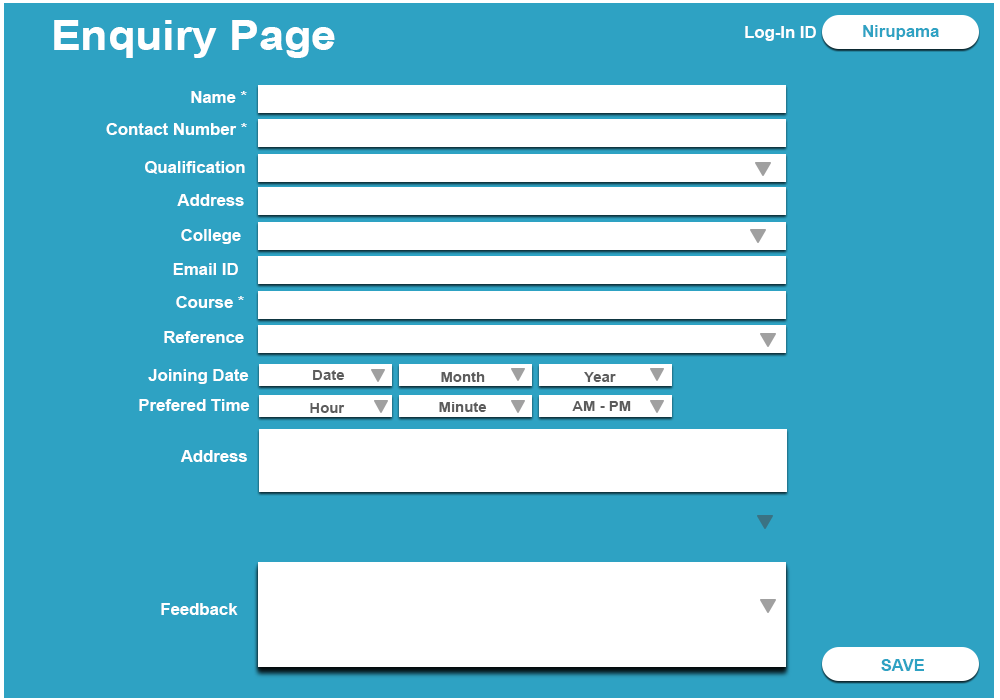
<style>
.page{position:relative;width:1000px;height:700px;background:#2ea2c3}
.page>*{position:absolute;margin:0}
.t1{font:42.2px "Arial-BoldMT";color:#ffffff;scale:1.06 1}
.t2{font:16.6px "Arial-BoldMT";color:#ffffff}
.t3{font:16.6px "Arial-BoldMT";color:#2ea2c3}
.t4{font:15.8px "Arial-BoldMT";color:#ffffff;scale:1.06 1}
.t5{font:14.3px "Arial-BoldMT";color:#5c5c5c;scale:1.05 1}
</style>
<div class="page">
<p class="t1" style="left:54px;top:20px;width:281px;height:38px">Enquiry Page</p>
<p class="t2" style="left:745px;top:26px;width:71px;height:15px">Log-In ID</p>
<p class="t3" style="left:863px;top:25px;width:76px;height:15px">Nirupama</p>
<p class="t4" style="left:191px;top:91px;width:56px;height:12px">Name *</p>
<p class="t4" style="left:106px;top:123px;width:141px;height:12px">Contact Number *</p>
<p class="t4" style="left:145px;top:161px;width:100px;height:13px">Qualification</p>
<p class="t4" style="left:177px;top:194px;width:67px;height:12px">Address</p>
<p class="t4" style="left:181px;top:229px;width:60px;height:15px">College</p>
<p class="t4" style="left:173px;top:263px;width:65px;height:12px">Email ID</p>
<p class="t4" style="left:176px;top:296px;width:68px;height:12px">Course *</p>
<p class="t4" style="left:164px;top:331px;width:80px;height:12px">Reference</p>
<p class="t4" style="left:148px;top:369px;width:101px;height:15px">Joining Date</p>
<p class="t5" style="left:313px;top:370px;width:32px;height:10px">Date</p>
<p class="t5" style="left:441px;top:372px;width:44px;height:10px">Month</p>
<p class="t5" style="left:584px;top:372px;width:32px;height:10px">Year</p>
<p class="t4" style="left:139px;top:399px;width:111px;height:12px">Prefered Time</p>
<p class="t5" style="left:572px;top:401px;width:59px;height:10px">AM - PM</p>
<p class="t5" style="left:310px;top:403px;width:35px;height:10px">Hour</p>
<p class="t5" style="left:439px;top:402px;width:48px;height:10px">Minute</p>
<p class="t2" style="left:180px;top:450px;width:67px;height:12px">Address</p>
<p class="t4" style="left:161px;top:603px;width:77px;height:12px">Feedback</p>
<p class="t3" style="left:881px;top:659px;width:43px;height:12px">SAVE</p>
</div>
